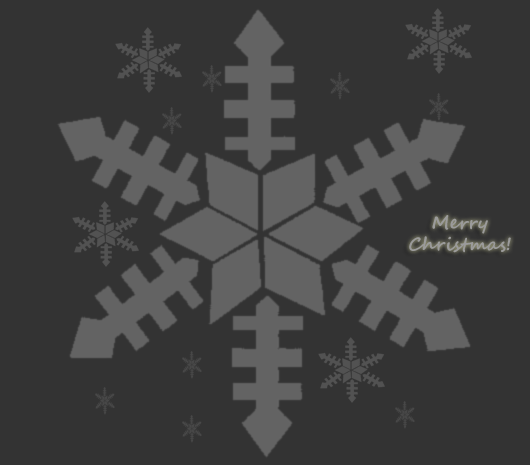
<style>
.page{position:relative;width:530px;height:465px;background:#333333}
.page>*{position:absolute;margin:0}
.t1{font:18px "SegoeScript-Bold";color:#9b9b9b}
</style>
<div class="page">
<p class="t1" style="left:409px;top:215px;width:102px;height:38px;text-align:center">Merry<br>Christmas!</p>
</div>
